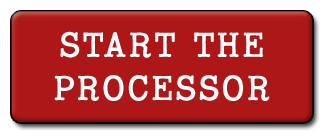
<style>
.page{position:relative;width:327px;height:137px;background:#ad1717}
.page>*{position:absolute;margin:0}
.t1{font:36px "Coronette";letter-spacing:0.05em;color:#ffffff}
</style>
<div class="page">
<p class="t1" style="left:54px;top:31px;width:216px;height:70px;text-align:center">START THE<br>PROCESSOR</p>
</div>
